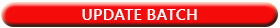
<style>
.page{position:relative;width:280px;height:28px;background:#f60b0b}
.page>*{position:absolute;margin:0}
.t1{font:16.4px "YuGothicUI-Bold";color:#ffffff}
</style>
<div class="page">
<p class="t1" style="left:82px;top:9px;width:115px;height:11px">UPDATE BATCH</p>
</div>
